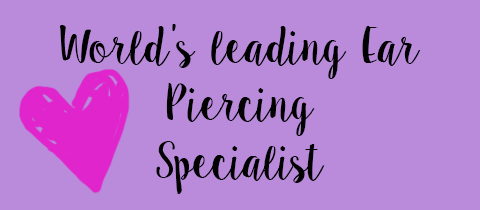
<style>
.page{position:relative;width:480px;height:210px;background:#ba8bdb}
.page>*{position:absolute;margin:0}
.t1{font:48px "Sweet_Pea";color:#020202}
</style>
<div class="page">
<p class="t1" style="left:59px;top:24px;width:362px;height:170px;text-align:center">World’s leading Ear Piercing <br>Specialist</p>
</div>
